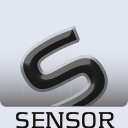
<style>
.page{position:relative;width:128px;height:128px;background:#e1e6f1}
.page>*{position:absolute;margin:0}
.t1{font:24px "KontrapunktLight";letter-spacing:0.005em;color:#15100c;font-weight:bold}
</style>
<div class="page">
<p class="t1" style="left:16px;top:112px;width:99px;height:17px">SENSOR</p>
</div>
